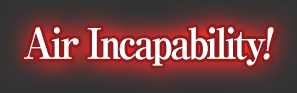
<style>
.page{position:relative;width:297px;height:93px}
.page>*{position:absolute;margin:0}
.t1{font:42px "RyuminPro-ExBold";letter-spacing:-0.08em;color:#ffffff;scale:0.9 1}
.t2{font:42px "RyuminPro-ExBold";letter-spacing:-0.08em;color:#ffffff;font-style:italic;scale:0.9 1}
</style>
<div class="page">
<p class="t1" style="left:24px;top:27px;width:250px;height:39px">Air Incapability<span class="t2">!</span></p>
</div>
